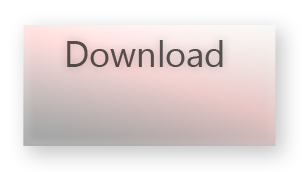
<style>
.page{position:relative;width:302px;height:172px}
.page>*{position:absolute;margin:0}
.t1{font:36px "SegoeUI";color:#554c4c}
</style>
<div class="page">
<p class="t1" style="left:67px;top:40px;width:156px;height:27px">Download</p>
</div>
